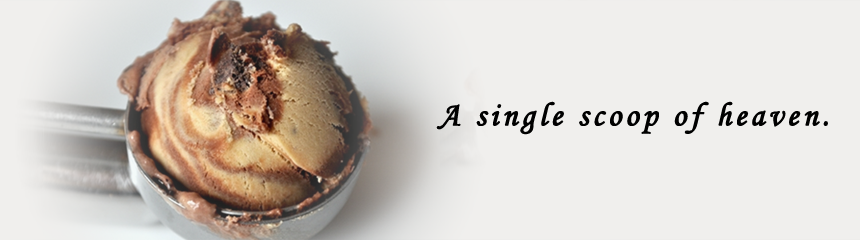
<style>
.page{position:relative;width:860px;height:240px;background:#f0efed}
.page>*{position:absolute;margin:0}
.t1{font:33px "MonotypeCorsiva";letter-spacing:0.1em;color:#000000;font-weight:bold}
</style>
<div class="page">
<p class="t1" style="left:436px;top:101px;width:392px;height:34px">A single scoop of heaven.</p>
</div>
